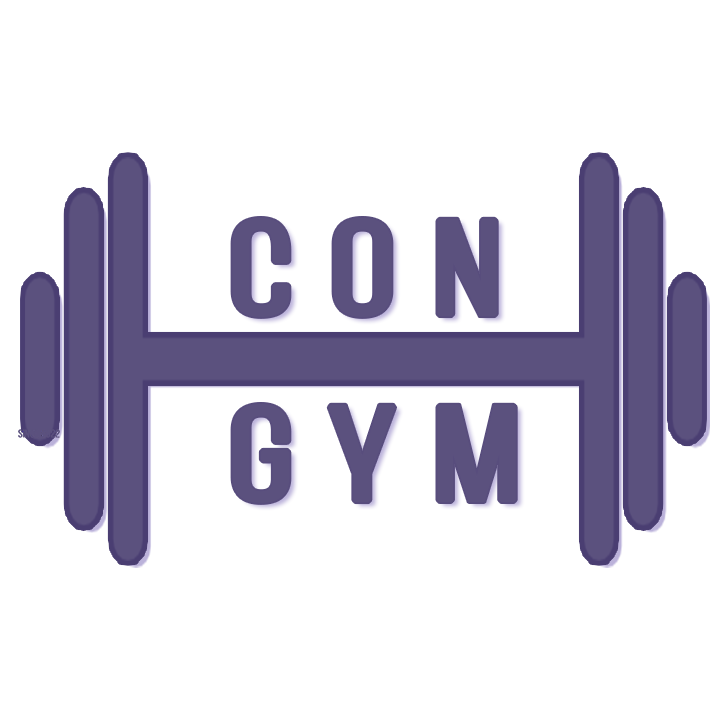
<style>
.page{position:relative;width:720px;height:720px;background:#ffffff}
.page>*{position:absolute;margin:0}
.t1{font:133.3px "BebasNeueRegular";letter-spacing:0.2em;color:#5b517e;font-weight:bold;scale:1.25 1}
</style>
<div class="page">
<p class="t1" style="left:232px;top:218px;width:265px;height:99px">CON</p>
<p class="t1" style="left:232px;top:404px;width:284px;height:99px">GYM</p>
</div>
